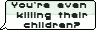
<style>
.page{position:relative;width:96px;height:30px;background:#fcfffb}
.page>*{position:absolute;margin:0}
.t1{font:8.5px "SFPixelate-Bold";color:#1b281e;scale:1.26 1}
</style>
<div class="page">
<p class="t1" style="left:11px;top:2px;width:77px;height:26px;text-align:center">You’re even <br>killing their<br>children?</p>
</div>
